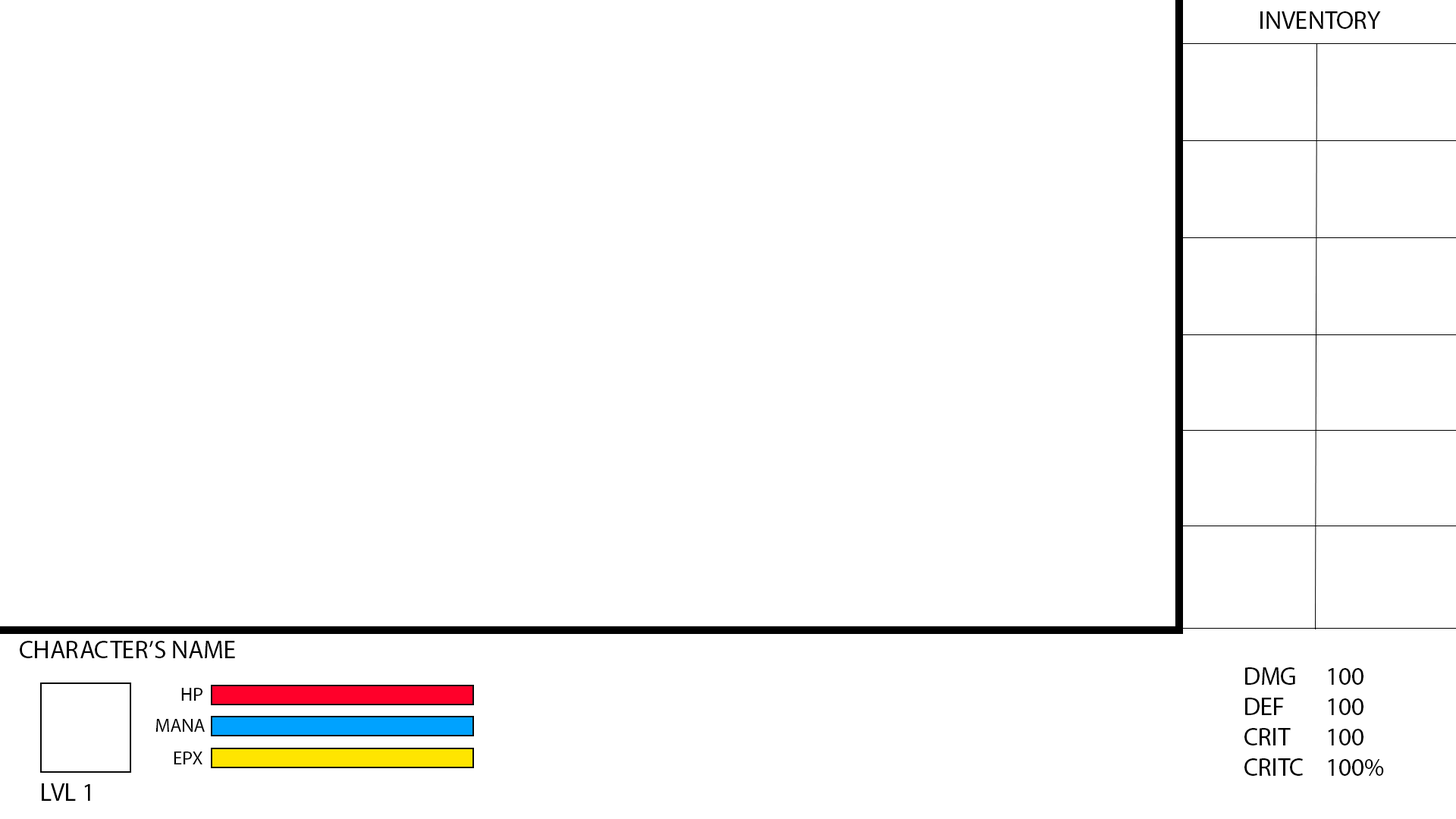
<style>
.page{position:relative;width:1456px;height:819px;background:#ffffff}
.page>*{position:absolute;margin:0}
.t1{font:25.3px "MyriadPro-Regular";color:#000000}
.t2{font:19px "MyriadPro-Regular";color:#000000}
</style>
<div class="page">
<p class="t1" style="left:1260px;top:11px;width:121px;height:18px">INVENTORY</p>
<p class="t1" style="left:20px;top:641px;width:215px;height:17px">CHARACTER’S NAME</p>
<p class="t1" style="left:1244px;top:667px;width:140px;height:110px">DMG  100<br>DEF  100<br>CRIT  100<br>CRITC 100%</p>
<p class="t2" style="left:181px;top:688px;width:21px;height:13px">HP</p>
<p class="t2" style="left:155px;top:719px;width:50px;height:13px">MANA</p>
<p class="t2" style="left:174px;top:751px;width:28px;height:13px">EPX</p>
<p class="t1" style="left:42px;top:783px;width:48px;height:18px">LVL 1</p>
</div>
